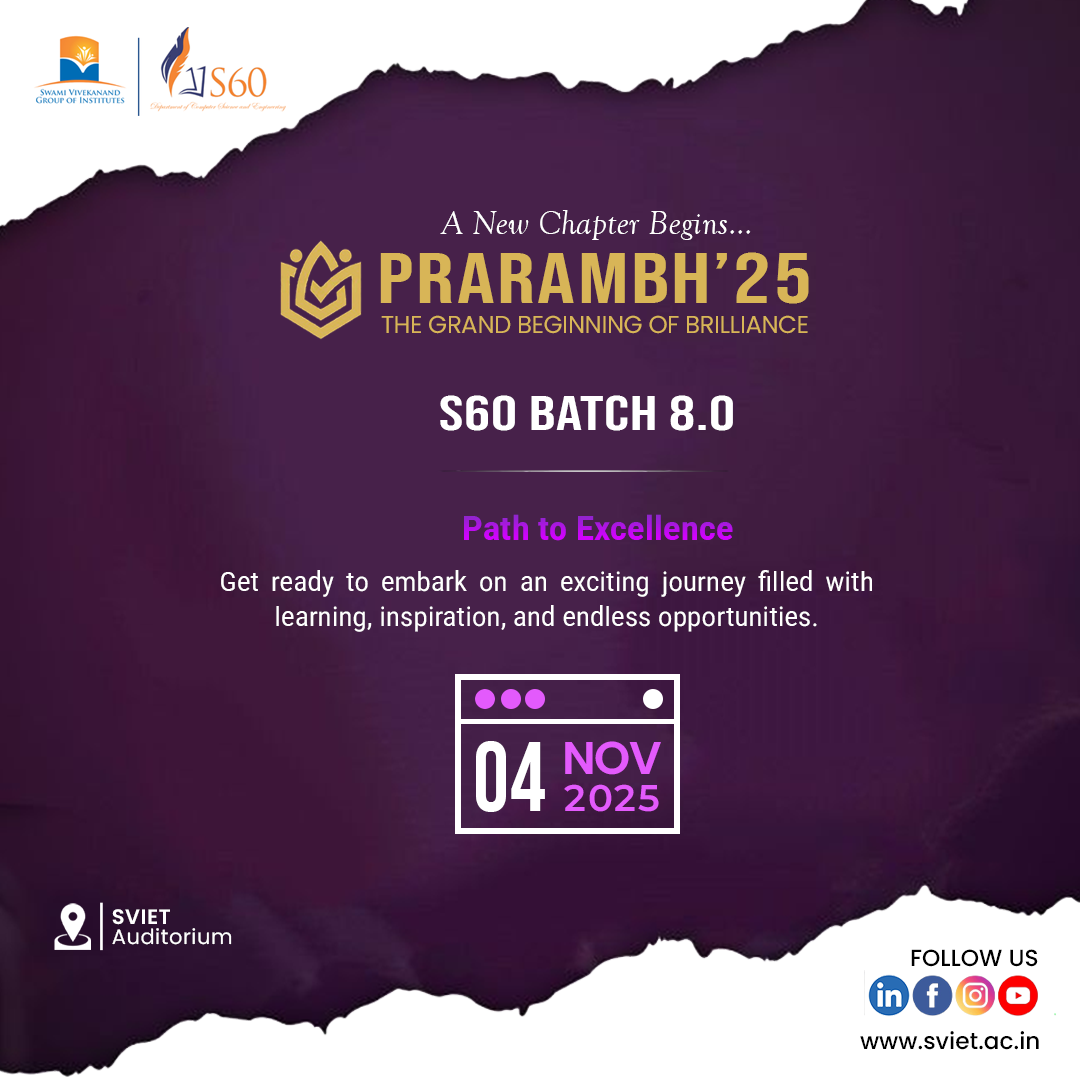
<style>
.page{position:relative;width:1080px;height:1080px}
.page>*{position:absolute;margin:0}
.t1{font:34.2px "GoudyOldStyleT-Italic";letter-spacing:0.01em;color:#ffffff}
.t2{font:71.3px "BebasNeue-Regular";letter-spacing:0.025em;color:#d8b557;scale:1.32 1}
.t3{font:24.5px "Poppins-Regular";letter-spacing:-0.018em;color:#d8b557}
.t4{font:49.4px "BebasNeue-Regular";letter-spacing:0.01em;color:#ffffff;scale:1.32 1}
.t5{font:33.9px "RobotoSemiCondensed-Bold";letter-spacing:0.01em}
.t6{font:26.8px/35.3px "RobotoSemiCondensed-Regular";letter-spacing:0.01em;color:#ffffff}
.t7{font:99.5px "BebasNeue-Regular";letter-spacing:0.01em;color:#ffffff;scale:0.9 1}
.t8{font:45.9px "Poppins-SemiBold";letter-spacing:-0.025em;color:#e35afc}
.t9{font:37px "Montserrat-SemiBold";letter-spacing:0.05em;color:#e35afc}
.t10{font:20.9px/20.9px "Poppins-Regular";letter-spacing:0.025em;color:#ffffff}
.t11{font:20.9px/20.9px "Poppins-SemiBold";letter-spacing:0.025em;color:#ffffff}
.t12{font:23.3px "Poppins-Medium";color:#000000}
</style>
<div class="page">
<p class="t1" style="left:440px;top:210px;width:311px;height:30px">A New Chapter Begins...</p>
<p class="t2" style="left:380px;top:252px;width:429px;height:52px">PRARAMBH’25</p>
<p class="t3" style="left:381px;top:315px;width:427px;height:19px">THE GRAND BEGINNING OF BRILLIANCE</p>
<p class="t4" style="left:440px;top:395px;width:293px;height:36px">S60 BATCH 8.0</p>
<p class="t5" style="left:464px;top:514px;width:269px;height:27px">Path to Excellence</p>
<p class="t6" style="left:221px;top:570px;width:651px;height:62px;text-align:justify">Get ready to embark on an exciting journey filled with learning, inspiration, and endless opportunities.</p>
<p class="t7" style="left:476px;top:741px;width:69px;height:71px">04</p>
<p class="t8" style="left:565px;top:741px;width:96px;height:34px">NOV</p>
<p class="t9" style="left:564px;top:784px;width:95px;height:28px">2025</p>
<p class="t10" style="left:112px;top:909px;width:120px;height:36px"><span class="t11">SVIET<br></span>Auditorium</p>
<p class="t12" style="left:911px;top:949px;width:127px;height:18px">FOLLOW US</p>
<p class="t12" style="left:860px;top:1031px;width:179px;height:19px">www.sviet.ac.in</p>
</div>
